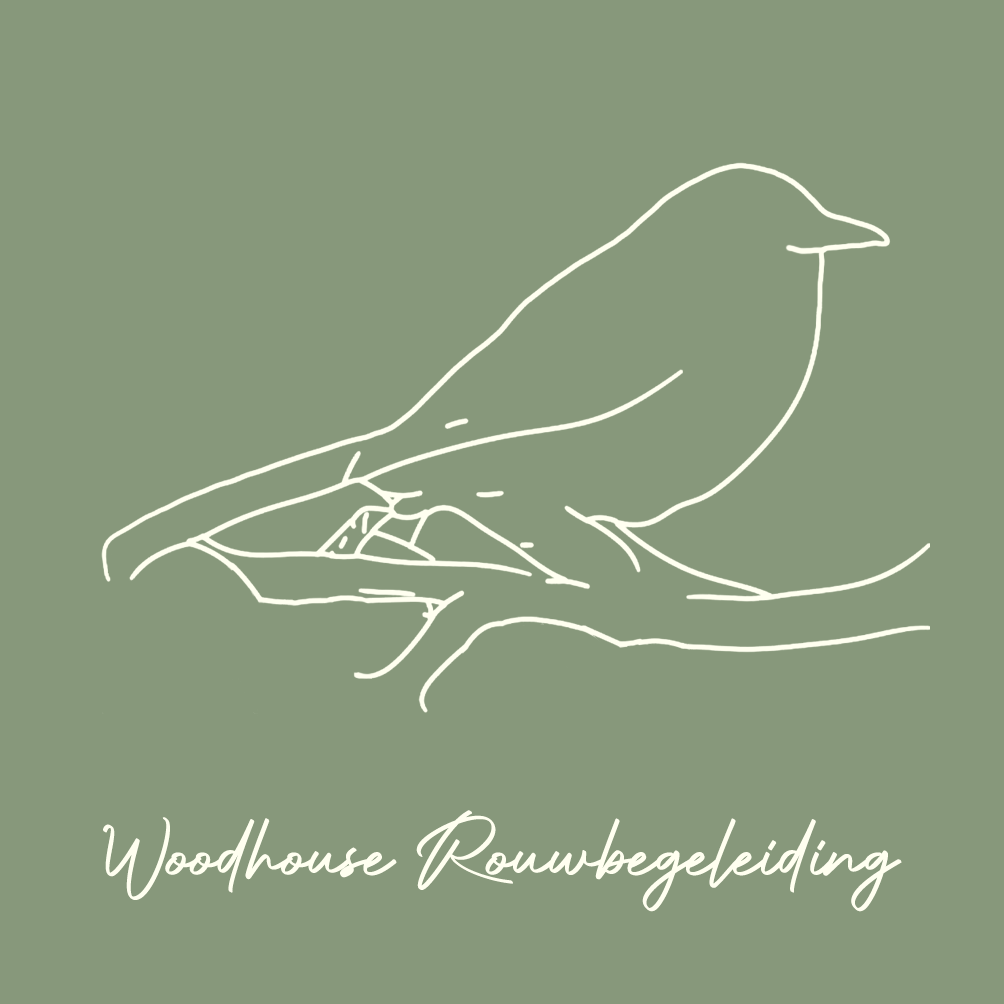
<style>
.page{position:relative;width:1004px;height:1004px;background:#87987b}
.page>*{position:absolute;margin:0}
.t1{font:104.2px "Authentic-Signature";color:#fffff0}
</style>
<div class="page">
<p class="t1" style="left:103px;top:810px;width:799px;height:102px">Woodhouse Rouwbegeleiding</p>
</div>
